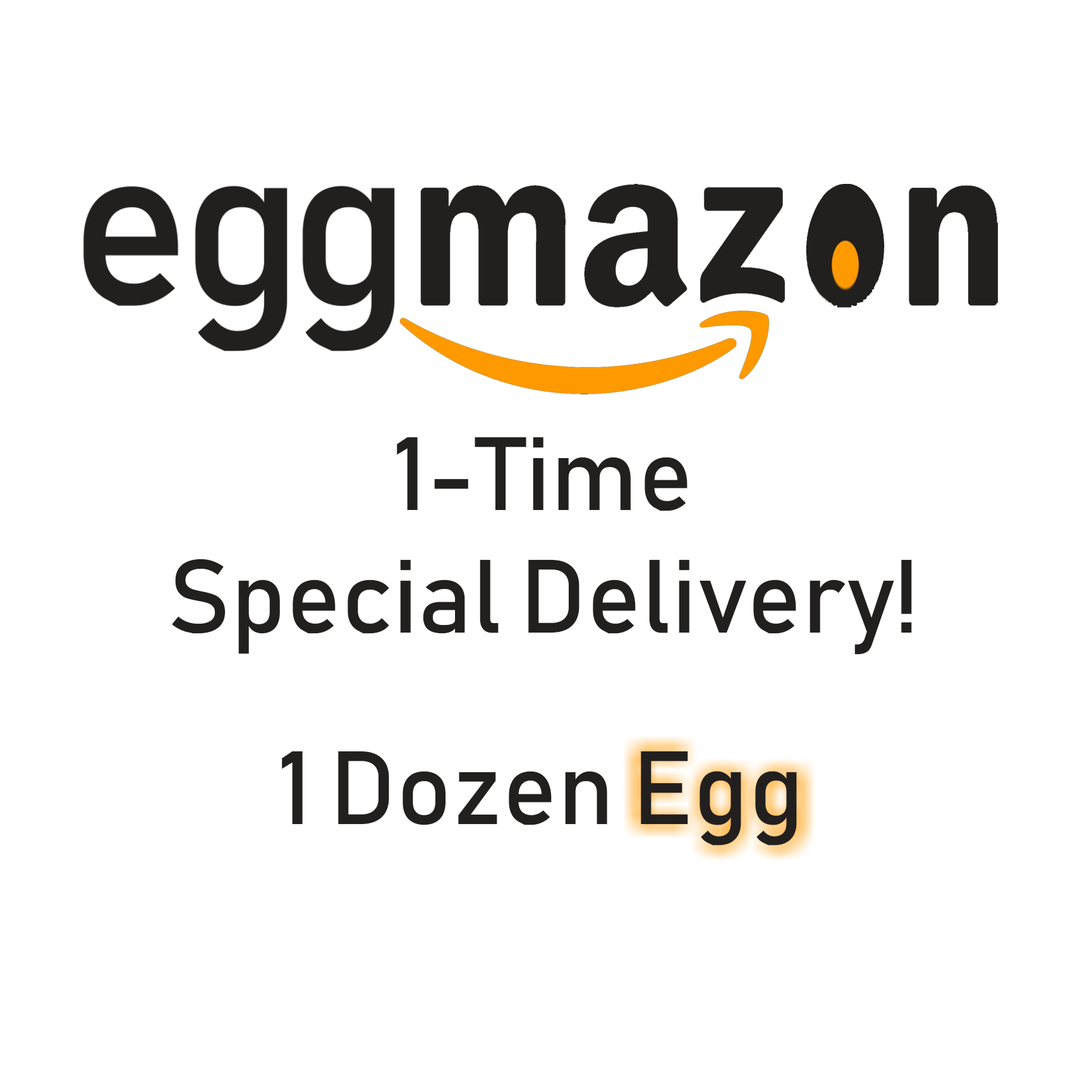
<style>
.page{position:relative;width:1092px;height:1092px;background:#ffffff}
.page>*{position:absolute;margin:0}
.t1{font:102.4px "Bahnschrift";color:#221f1f}
</style>
<div class="page">
<p class="t1" style="left:172px;top:437px;width:740px;height:218px;text-align:center">1-Time<br>Special Delivery!</p>
<p class="t1" style="left:282px;top:751px;width:515px;height:95px">1 Dozen Egg</p>
</div>
